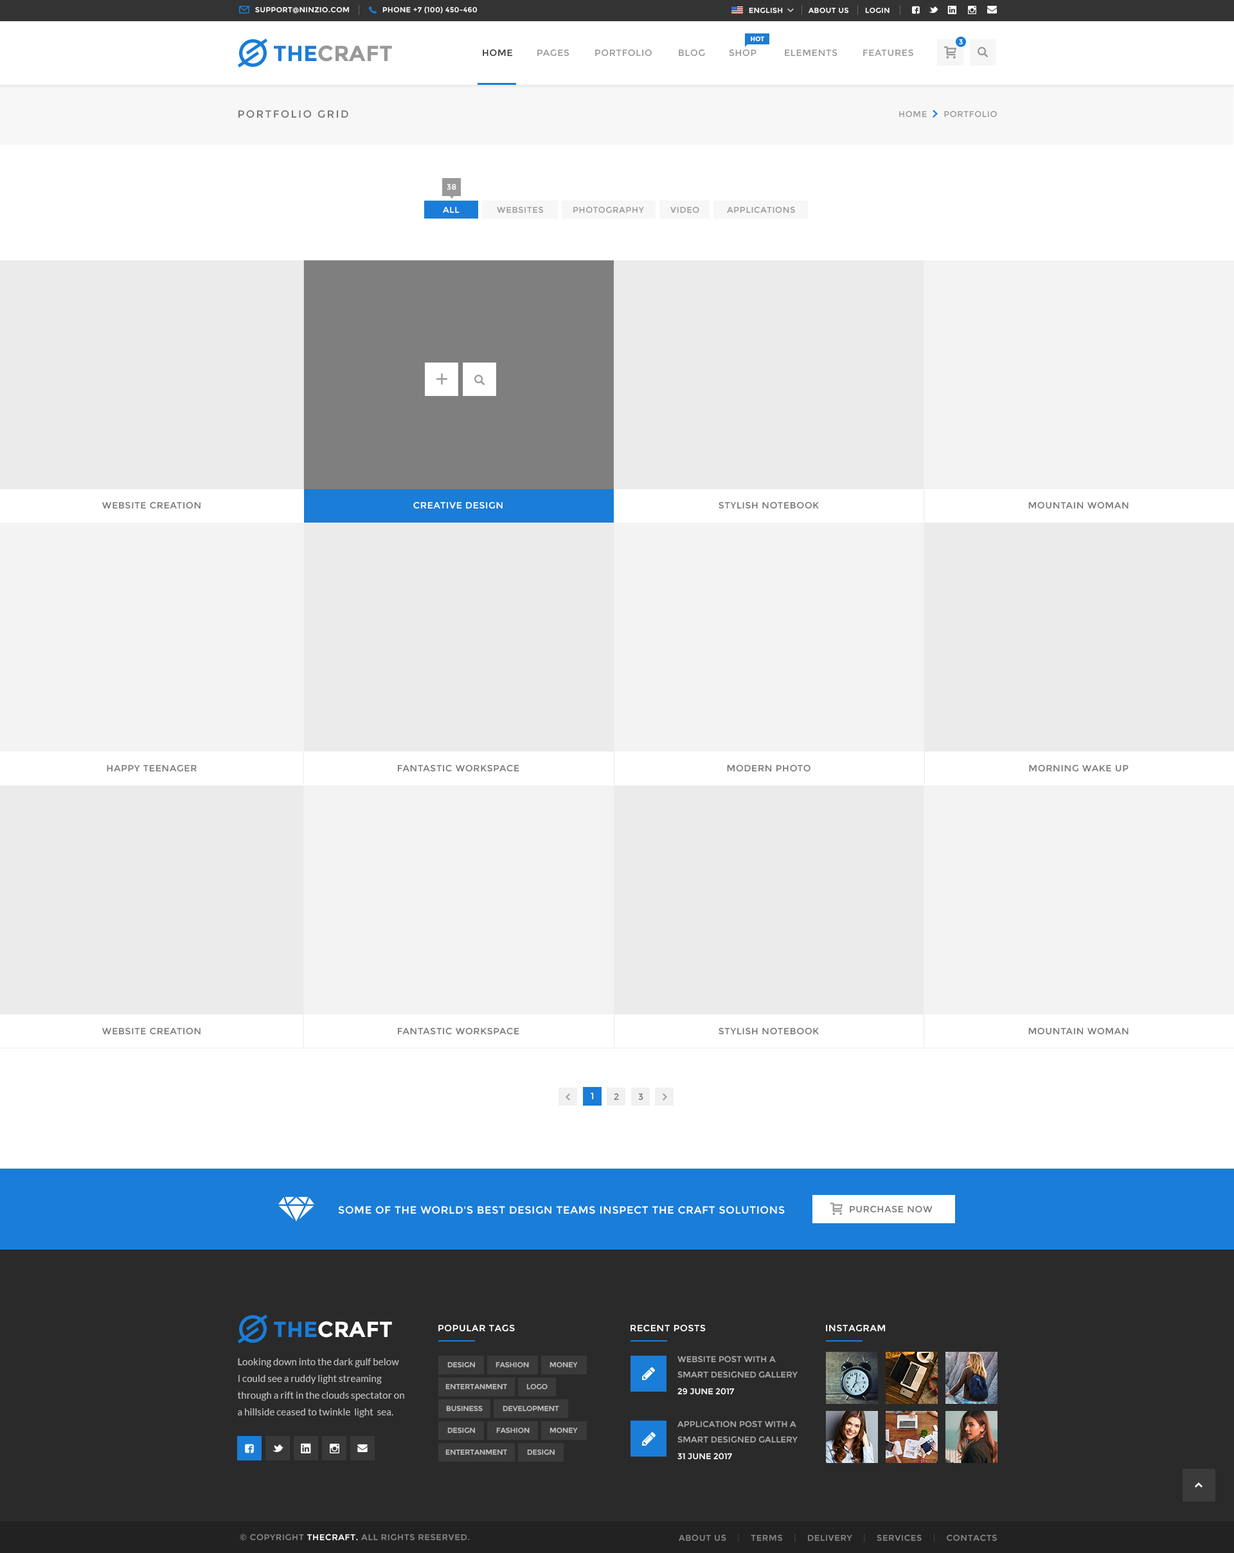
<style>
.page{position:relative;width:1234px;height:1553px;background:#ffffff}
.page>*{position:absolute;margin:0}
.t1{font:7.1px "Montserrat-Regular";letter-spacing:0.05em;color:#ffffff;text-transform:uppercase}
.t2{font:6.4px "Montserrat-Bold";color:#ffffff;text-transform:uppercase}
.t3{font:21.9px "Montserrat-Bold";color:#999999;text-transform:uppercase}
.t4{font:21.9px "Montserrat-Bold";color:#1a7dd7;text-transform:uppercase}
.t5{font:9px "Montserrat-Regular";letter-spacing:0.05em;color:#333333;text-transform:uppercase}
.t6{font:9px "Montserrat-Regular";letter-spacing:0.05em;color:#999999;text-transform:uppercase}
.t7{font:10.3px "Montserrat-Regular";letter-spacing:0.15em;color:#777777;text-transform:uppercase}
.t8{font:8.4px "Montserrat-Regular";letter-spacing:0.05em;color:#999999;text-transform:uppercase}
.t9{font:7.7px "Montserrat-Regular";letter-spacing:0.05em;color:#ffffff;text-transform:uppercase}
.t10{font:8.4px "Montserrat-Regular";letter-spacing:0.05em;color:#ffffff;text-transform:uppercase}
.t11{font:9px "Montserrat-Regular";letter-spacing:0.05em;color:#777777;text-transform:uppercase}
.t12{font:9px "Montserrat-Regular";letter-spacing:0.05em;color:#ffffff;text-transform:uppercase}
.t13{font:10.3px "Montserrat-Regular";letter-spacing:0.05em;color:#ffffff;text-transform:uppercase}
.t14{font:21.9px "Montserrat-Bold";color:#ffffff;text-transform:uppercase}
.t15{font:9.6px/16.7px "Lato-Regular";color:#bdbdbd}
.t16{font:8.4px/15.4px "Montserrat-Regular";color:#ababab;text-transform:uppercase}
.t17{font:7.1px "Montserrat-Regular";color:#c0c0c0;text-transform:uppercase}
.t18{font:8.4px "Montserrat-Regular";color:#ffffff;text-transform:uppercase}
.t19{font:7.1px "Montserrat-Regular";color:#c1c1c1;text-transform:uppercase}
.t20{font:8.4px "Montserrat-Regular";letter-spacing:0.05em;color:#878787;text-transform:uppercase}
.t21{font:8.4px "Montserrat-Regular";letter-spacing:0.05em;color:#404040;text-transform:uppercase}
.t22{font:8.4px "Montserrat-Regular";letter-spacing:0.05em;color:#414141;text-transform:uppercase}
</style>
<div class="page">
<p class="t1" style="left:255px;top:7px;width:94px;height:7px">support@ninzio.com</p>
<p class="t1" style="left:382px;top:6px;width:96px;height:8px">phone +7 (100) 450-460</p>
<p class="t1" style="left:749px;top:8px;width:141px;height:6px">English           About Us       Login</p>
<p class="t2" style="left:751px;top:36px;width:14px;height:6px">Hot</p>
<p class="t1" style="left:959px;top:39px;width:4px;height:6px">3</p>
<p class="t3" style="left:274px;top:45px;width:118px;height:17px"><span class="t4">The</span>Craft</p>
<p class="t5" style="left:483px;top:49px;width:30px;height:8px">Home</p>
<p class="t6" style="left:537px;top:49px;width:33px;height:8px">Pages</p>
<p class="t6" style="left:595px;top:49px;width:57px;height:8px">Portfolio</p>
<p class="t6" style="left:679px;top:49px;width:26px;height:8px">Blog</p>
<p class="t6" style="left:729px;top:49px;width:28px;height:8px">Shop</p>
<p class="t6" style="left:785px;top:49px;width:53px;height:8px">Elements</p>
<p class="t6" style="left:863px;top:49px;width:51px;height:8px">Features</p>
<p class="t7" style="left:238px;top:110px;width:110px;height:8px">Portfolio Grid</p>
<p class="t8" style="left:899px;top:111px;width:98px;height:7px">Home      Portfolio</p>
<p class="t9" style="left:447px;top:184px;width:9px;height:6px">38</p>
<p class="t10" style="left:443px;top:206px;width:17px;height:7px">All</p>
<p class="t8" style="left:497px;top:206px;width:47px;height:7px">Websites</p>
<p class="t8" style="left:573px;top:206px;width:71px;height:7px">Photography</p>
<p class="t8" style="left:670px;top:206px;width:29px;height:7px">Video</p>
<p class="t8" style="left:727px;top:206px;width:68px;height:7px">Applications</p>
<p class="t11" style="left:102px;top:501px;width:99px;height:8px">Website Creation</p>
<p class="t12" style="left:413px;top:501px;width:90px;height:8px">Creative Design</p>
<p class="t11" style="left:719px;top:501px;width:100px;height:8px">Stylish Notebook</p>
<p class="t11" style="left:1029px;top:501px;width:100px;height:8px">Mountain Woman</p>
<p class="t11" style="left:107px;top:764px;width:90px;height:8px">Happy Teenager</p>
<p class="t11" style="left:397px;top:764px;width:122px;height:8px">Fantastic Workspace</p>
<p class="t11" style="left:727px;top:764px;width:84px;height:8px">Modern Photo</p>
<p class="t11" style="left:1029px;top:764px;width:100px;height:8px">Morning Wake Up</p>
<p class="t11" style="left:102px;top:1027px;width:99px;height:8px">Website Creation</p>
<p class="t11" style="left:397px;top:1027px;width:122px;height:8px">Fantastic Workspace</p>
<p class="t11" style="left:719px;top:1027px;width:100px;height:8px">Stylish Notebook</p>
<p class="t11" style="left:1029px;top:1027px;width:100px;height:8px">Mountain Woman</p>
<p class="t12" style="left:591px;top:1094px;width:3px;height:7px">1</p>
<p class="t12" style="left:591px;top:1093px;width:3px;height:7px">1</p>
<p class="t11" style="left:614px;top:1093px;width:5px;height:8px">2</p>
<p class="t11" style="left:638px;top:1094px;width:6px;height:7px">3</p>
<p class="t13" style="left:338px;top:1206px;width:447px;height:8px">Some of the world's best design teams inspect The Craft solutions</p>
<p class="t11" style="left:850px;top:1205px;width:83px;height:8px">Purchase now</p>
<p class="t14" style="left:274px;top:1321px;width:118px;height:17px"><span class="t4">The</span>Craft</p>
<p class="t12" style="left:438px;top:1324px;width:77px;height:8px">Popular tags</p>
<p class="t12" style="left:631px;top:1324px;width:75px;height:8px">Recent Posts</p>
<p class="t12" style="left:826px;top:1324px;width:60px;height:8px">Instagram</p>
<p class="t15" style="left:237px;top:1358px;width:167px;height:60px">Looking down into the dark gulf below I could see a ruddy light streaming through a rift in the clouds spectator on a hillside ceased to twinkle  light  sea.</p>
<p class="t16" style="left:678px;top:1356px;width:120px;height:22px">Website Post with A Smart Designed Gallery Post</p>
<p class="t17" style="left:447px;top:1362px;width:28px;height:6px">Design</p>
<p class="t17" style="left:496px;top:1362px;width:33px;height:6px">Fashion</p>
<p class="t17" style="left:550px;top:1362px;width:28px;height:6px">Money</p>
<p class="t17" style="left:446px;top:1384px;width:61px;height:6px">Entertanment</p>
<p class="t17" style="left:526px;top:1384px;width:22px;height:6px">Logo</p>
<p class="t18" style="left:678px;top:1388px;width:57px;height:7px">29 June 2017</p>
<p class="t19" style="left:446px;top:1406px;width:37px;height:6px">Business</p>
<p class="t17" style="left:503px;top:1406px;width:56px;height:6px">Development</p>
<p class="t16" style="left:678px;top:1421px;width:120px;height:22px">Application Post with A Smart Designed Gallery Post</p>
<p class="t17" style="left:447px;top:1428px;width:28px;height:6px">Design</p>
<p class="t17" style="left:496px;top:1428px;width:34px;height:6px">Fashion</p>
<p class="t17" style="left:550px;top:1428px;width:28px;height:6px">Money</p>
<p class="t17" style="left:446px;top:1450px;width:61px;height:5px">Entertanment</p>
<p class="t17" style="left:527px;top:1450px;width:28px;height:5px">Design</p>
<p class="t18" style="left:678px;top:1453px;width:54px;height:7px">31 June 2017</p>
<p class="t20" style="left:240px;top:1534px;width:229px;height:7px">© Copyright <span class="t10">TheCraft. </span>All rights reserved.</p>
<p class="t20" style="left:679px;top:1534px;width:318px;height:9px">About Us   <span class="t21"> |</span>    Terms    <span class="t22">|</span>    Delivery    <span class="t22">|</span>    Services    <span class="t22">|</span>    Contacts</p>
</div>
